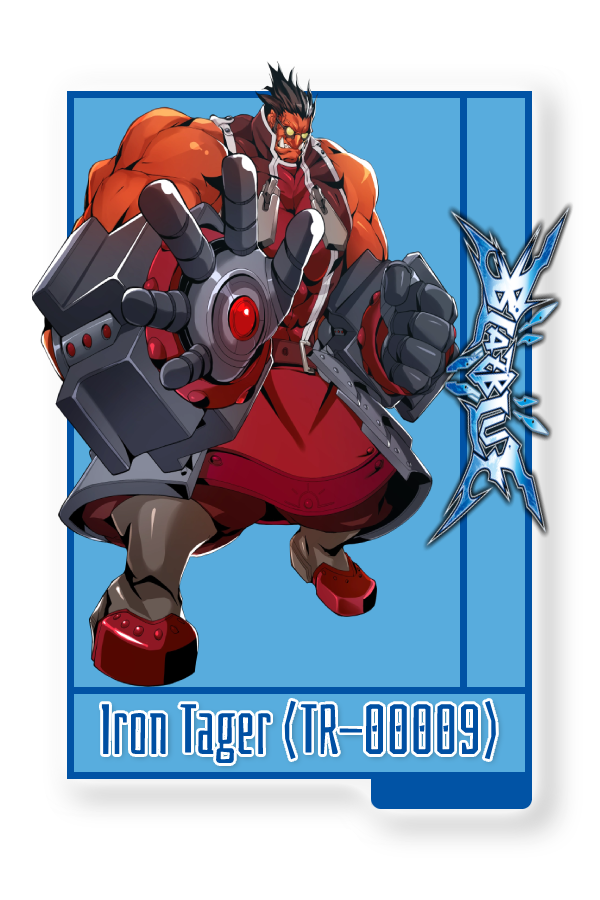
<style>
.page{position:relative;width:600px;height:900px;background:#ffffff}
.page>*{position:absolute;margin:0}
.t1{font:70px "Bahianita-Regular";color:#004fa2}
</style>
<div class="page">
<p class="t1" style="left:101px;top:700px;width:395px;height:64px">Iron Tager (TR-00009)</p>
</div>
